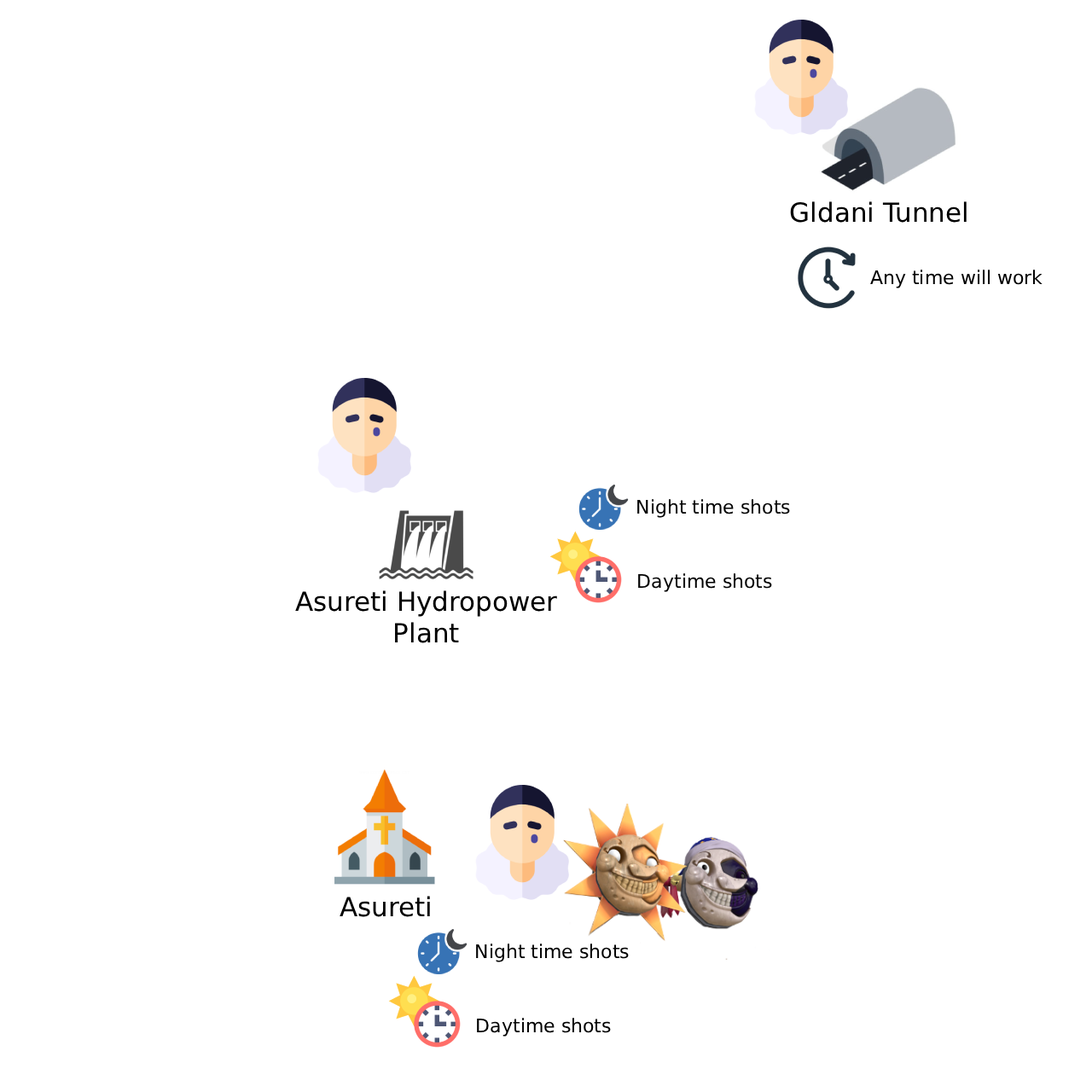
<style>
.page{position:relative;width:1092px;height:1092px;background:#ffffff}
.page>*{position:absolute;margin:0}
.t1{font:26.4px "DejaVuSans";color:#000000}
.t2{font:18.8px "DejaVuSans";color:#000000}
</style>
<div class="page">
<p class="t1" style="left:790px;top:201px;width:177px;height:22px">Gldani Tunnel</p>
<p class="t2" style="left:870px;top:270px;width:173px;height:18px">Any time will work</p>
<p class="t2" style="left:637px;top:499px;width:153px;height:19px">Night time shots</p>
<p class="t2" style="left:638px;top:573px;width:134px;height:19px">Daytime shots</p>
<p class="t1" style="left:295px;top:590px;width:262px;height:53px;text-align:center">Asureti Hydropower Plant</p>
<p class="t1" style="left:340px;top:896px;width:90px;height:21px">Asureti</p>
<p class="t2" style="left:476px;top:944px;width:153px;height:18px">Night time shots</p>
<p class="t2" style="left:477px;top:1018px;width:134px;height:19px">Daytime shots</p>
</div>
